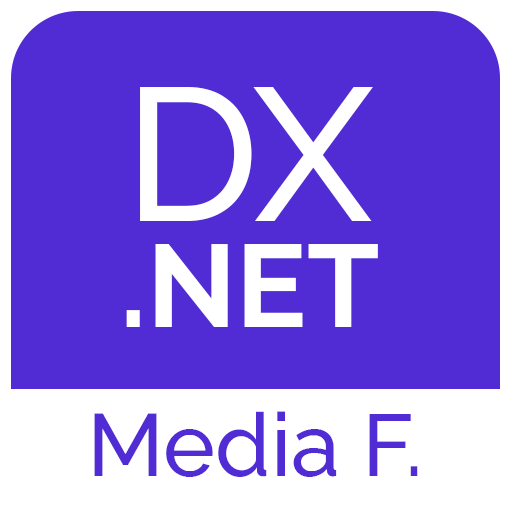
<style>
.page{position:relative;width:512px;height:512px;background:#512bd4}
.page>*{position:absolute;margin:0}
.t1{font:117.2px/105.5px "Raleway-Bold";color:#ffffff}
.t2{font:189.4px "Raleway-Medium";color:#ffffff}
.t3{font:88px "Raleway-Medium";color:#512bd4}
</style>
<div class="page">
<p class="t1" style="left:126px;top:87px;width:252px;height:240px;text-align:center"><span class="t2">DX<br></span>.NET</p>
<p class="t3" style="left:94px;top:411px;width:324px;height:66px">Media F.</p>
</div>
